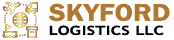
<style>
.page{position:relative;width:174px;height:40px;background:#ffffff}
.page>*{position:absolute;margin:0}
.t1{font:24.9px "FranklinGothic-Demi";color:#b1772c;text-transform:uppercase;scale:1.15 1}
.t2{font:12px "TrebuchetMS";color:#010101;text-transform:uppercase;font-weight:bold;scale:1.41 1}
</style>
<div class="page">
<p class="t1" style="left:49px;top:3px;width:121px;height:19px">Skyford</p>
<p class="t2" style="left:49px;top:25px;width:115px;height:11px">Logistics LLC</p>
</div>
